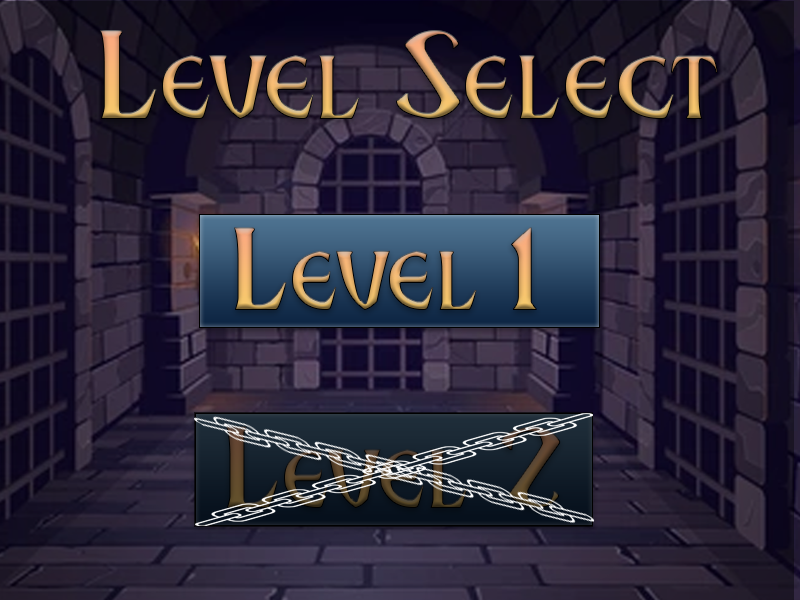
<style>
.page{position:relative;width:800px;height:600px}
.page>*{position:absolute;margin:0}
.t1{font:126.5px "BreatheFire"}
.t2{font:118.1px "BreatheFire"}
</style>
<div class="page">
<p class="t1" style="left:100px;top:30px;width:618px;height:89px">Level Select</p>
<p class="t2" style="left:234px;top:227px;width:303px;height:83px">Level 1</p>
</div>
